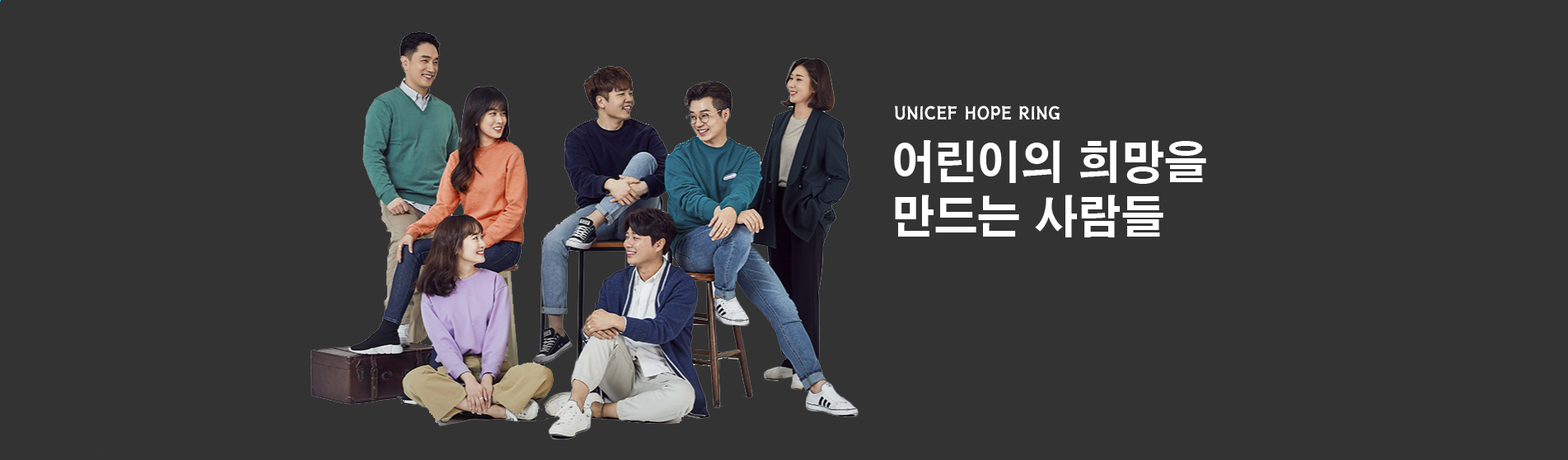
<style>
.page{position:relative;width:1568px;height:460px;background:#333333}
.page>*{position:absolute;margin:0}
.t1{font:19.8px "HaanSaleB";color:#ffffff;scale:0.95 1}
.t2{font:45.3px "HYgtrE";color:#ffffff;scale:0.95 1}
</style>
<div class="page">
<p class="t1" style="left:895px;top:105px;width:165px;height:15px">UNICEF HOPE RING</p>
<p class="t2" style="left:894px;top:140px;width:312px;height:97px">어린이의 희망을 <br>만드는 사람들</p>
</div>
